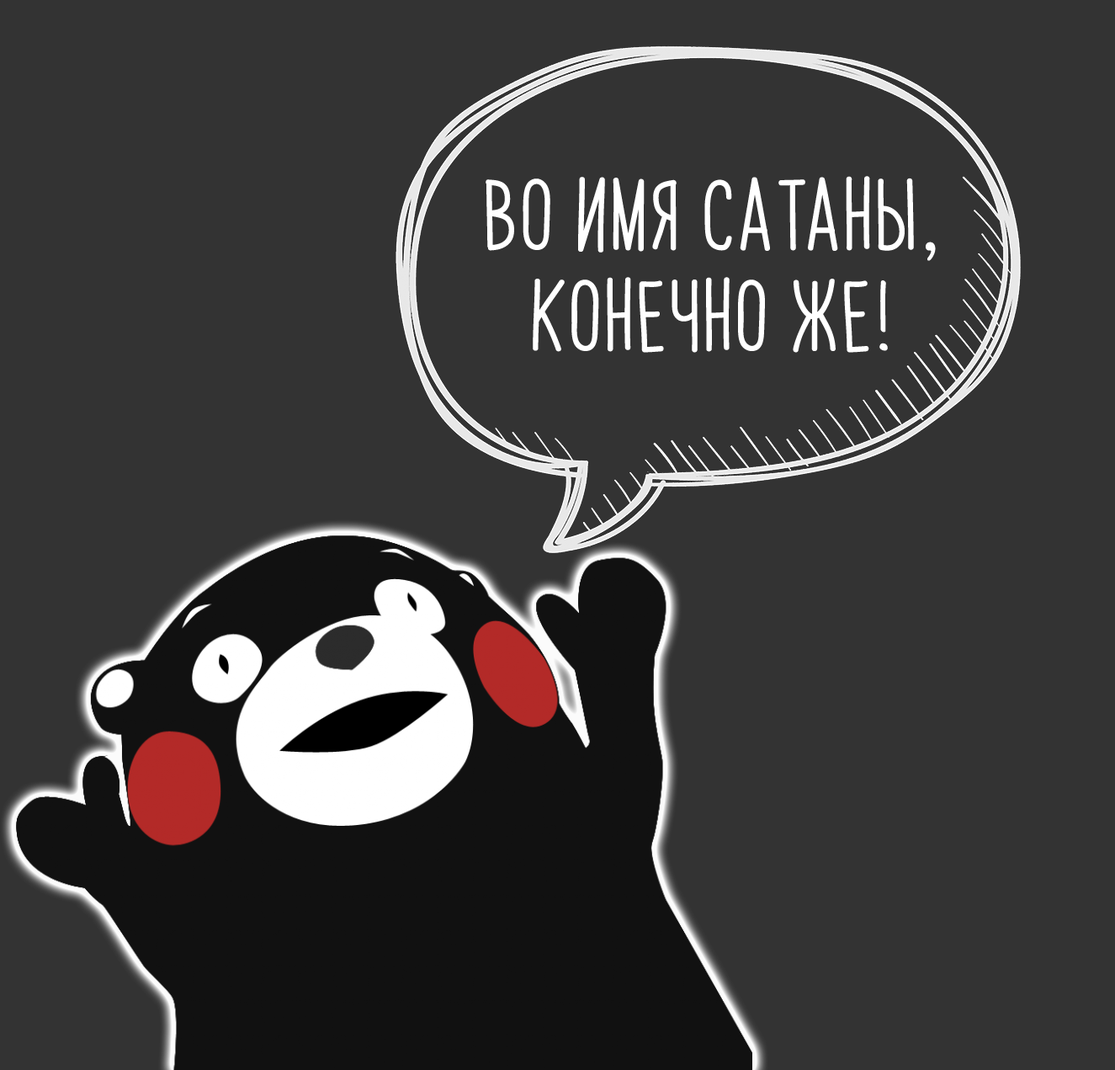
<style>
.page{position:relative;width:1115px;height:1070px;background:#333333}
.page>*{position:absolute;margin:0}
.t1{font:60.6px/101px "PapayaSunrise";color:#ffffff;font-weight:bold}
.t2{font:60.6px/101px "AmericanTypewriter";color:#ffffff;font-weight:bold}
.t3{font:75.7px/101px "LemonadeStand";color:#ffffff;font-weight:bold}
</style>
<div class="page">
<p class="t1" style="left:486px;top:176px;width:450px;height:177px;text-align:center">во имя сатаны<span class="t2">,<br></span>конечно же<span class="t3">!</span></p>
</div>
